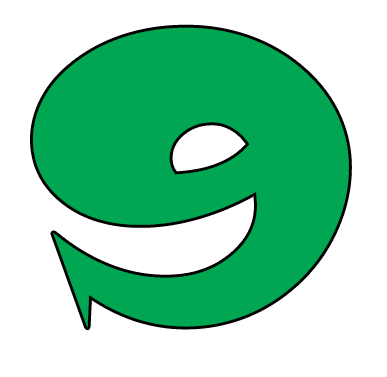
<style>
.page{position:relative;width:387px;height:377px;background:#ffffff}
.page>*{position:absolute;margin:0}
.t1{font:400px "SnapITC-Regular";color:#00a651}
</style>
<div class="page">
<p class="t1" style="left:33px;top:27px;width:316px;height:301px">9</p>
</div>
